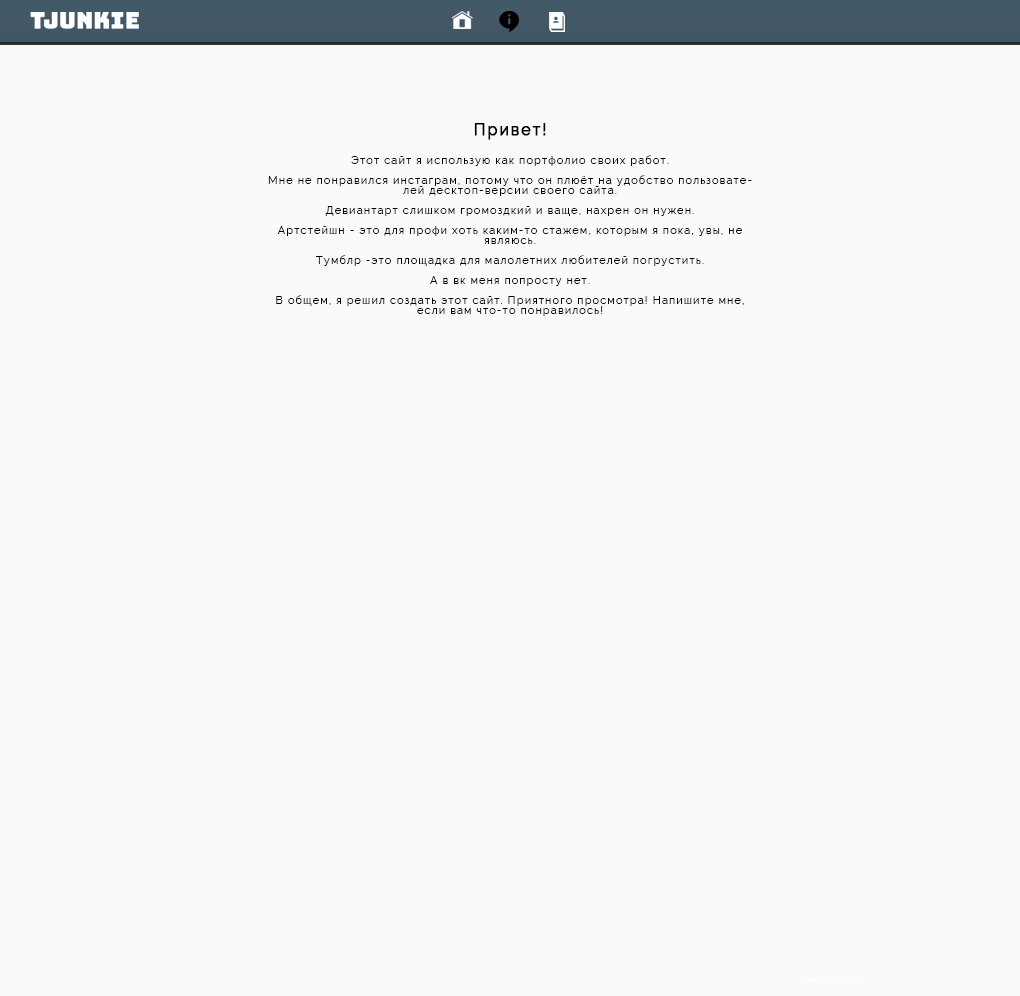
<style>
.page{position:relative;width:1020px;height:996px;background:#fafafa}
.page>*{position:absolute;margin:0}
.t1{font:16px "Raleway-Regular";letter-spacing:0.1em;color:#000000;font-weight:bold}
.t2{font:11px/10px "Raleway-Regular";letter-spacing:0.1em;color:#000000}
</style>
<div class="page">
<p class="t1" style="left:474px;top:123px;width:72px;height:17px">Привет!</p>
<p class="t2" style="left:268px;top:155px;width:484px;height:161px;text-align:center">Этот сайт я использую как портфолио своих работ. <br><br>Мне не понравился инстаграм, потому что он плюёт на удобство пользователей десктоп-версии своего сайта.<br><br>Девиантарт слишком громоздкий и ваще, нахрен он нужен.<br><br>Артстейшн - это для профи хоть каким-то стажем, которым я пока, увы, не являюсь.<br><br>Тумблр -это площадка для малолетних любителей погрустить.<br><br>А в вк меня попросту нет.<br><br>В общем, я решил создать этот сайт. Приятного просмотра! Напишите мне, если вам что-то понравилось!</p>
</div>
